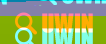
<style>
.page{position:relative;width:106px;height:44px}
.page>*{position:absolute;margin:0}
.t1{font:24px "Impact"}
</style>
<div class="page">
<p class="t1" style="left:42px;top:12px;width:51px;height:20px">UWIN</p>
</div>
